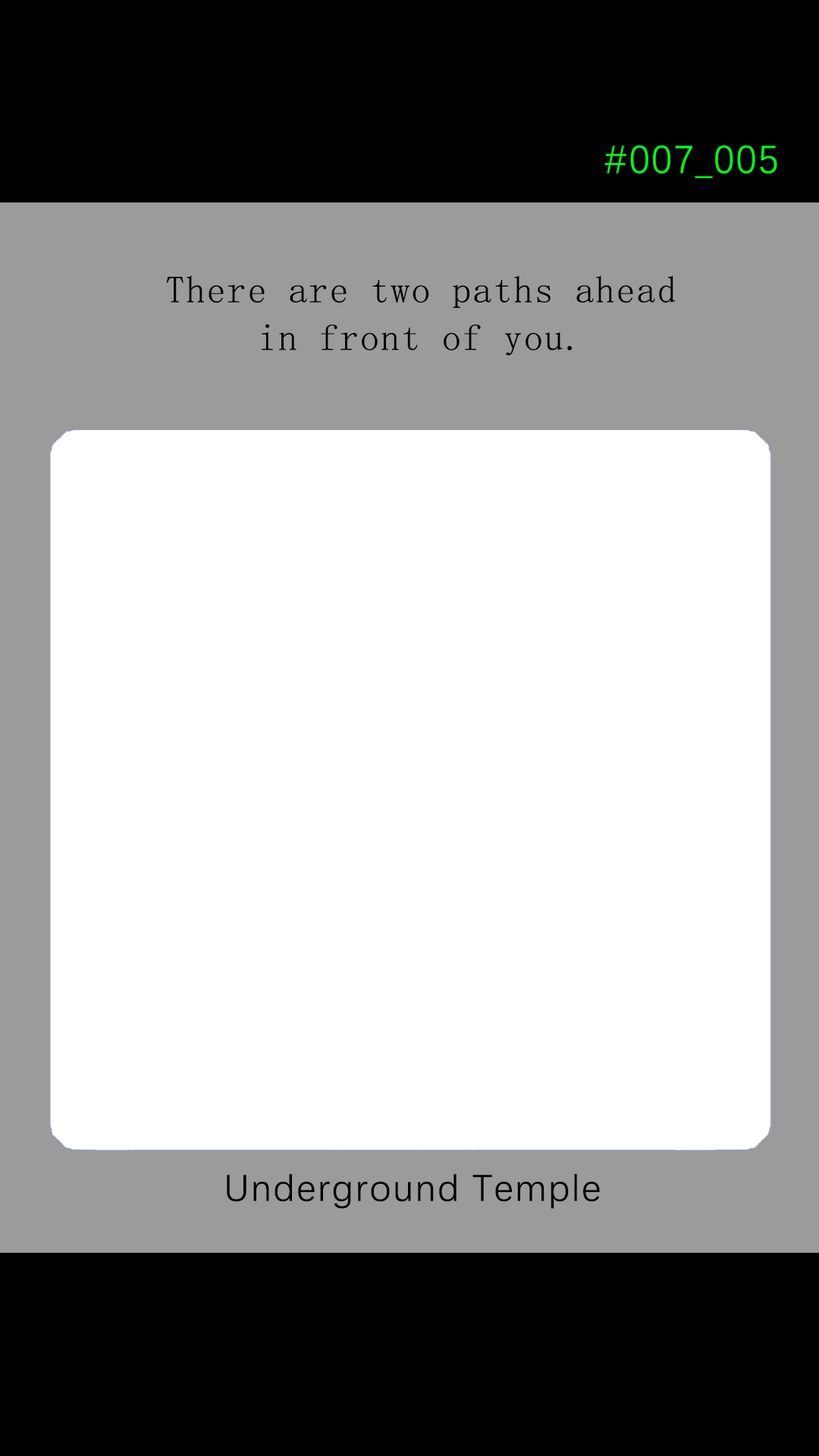
<style>
.page{position:relative;width:819px;height:1456px;background:#ffffff}
.page>*{position:absolute;margin:0}
.t1{font:39.2px "DengXian-Regular";letter-spacing:0.04em;color:#00ff1e}
.t2{font:37.9px/47.6px "SimSun";letter-spacing:0.04em;color:#000000}
.t3{font:37.9px "DengXian-Regular";letter-spacing:0.04em;color:#000000}
</style>
<div class="page">
<p class="t1" style="left:604px;top:145px;width:173px;height:33px">#007_005</p>
<p class="t2" style="left:166px;top:275px;width:510px;height:81px;text-align:center">There are two paths ahead<br>in front of you.</p>
<p class="t3" style="left:227px;top:1174px;width:373px;height:35px">Underground Temple</p>
</div>
